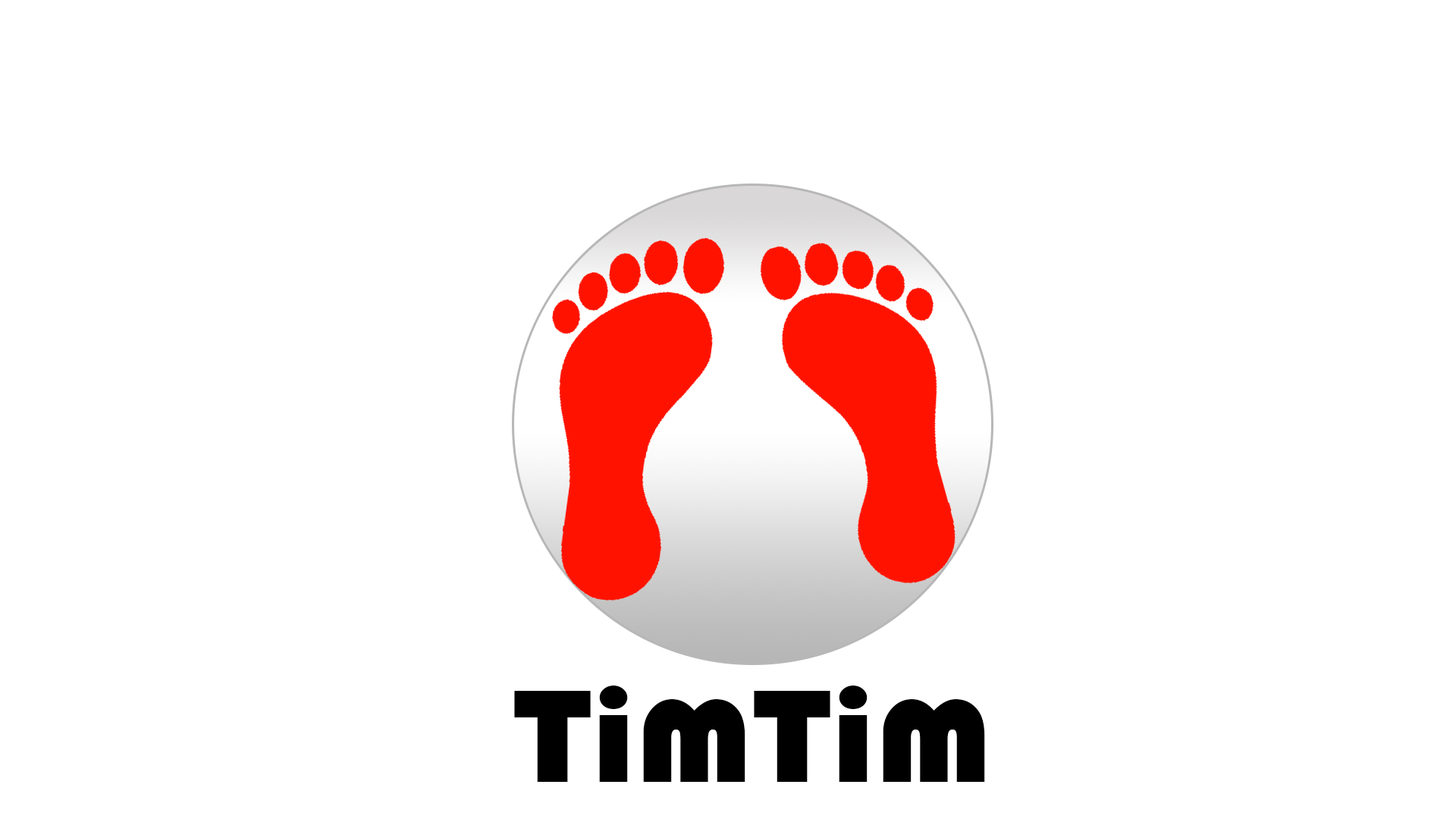
<style>
.page{position:relative;width:1456px;height:819px;background:#ffffff}
.page>*{position:absolute;margin:0}
.t1{font:136.5px "Bauhaus93";color:#000000;scale:1.11 1}
.t2{font:166.8px "Bauhaus93";color:#000000;scale:0.91 1}
</style>
<div class="page">
<p class="t1" style="left:514px;top:686px;width:471px;height:96px">Ti<span class="t2">m</span>Ti<span class="t2">m</span></p>
</div>
